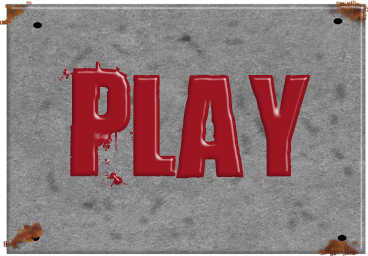
<style>
.page{position:relative;width:368px;height:256px}
.page>*{position:absolute;margin:0}
.t1{font:150px "LivingHell";color:#9b1522}
</style>
<div class="page">
<p class="t1" style="left:58px;top:57px;width:253px;height:143px">Play</p>
</div>
